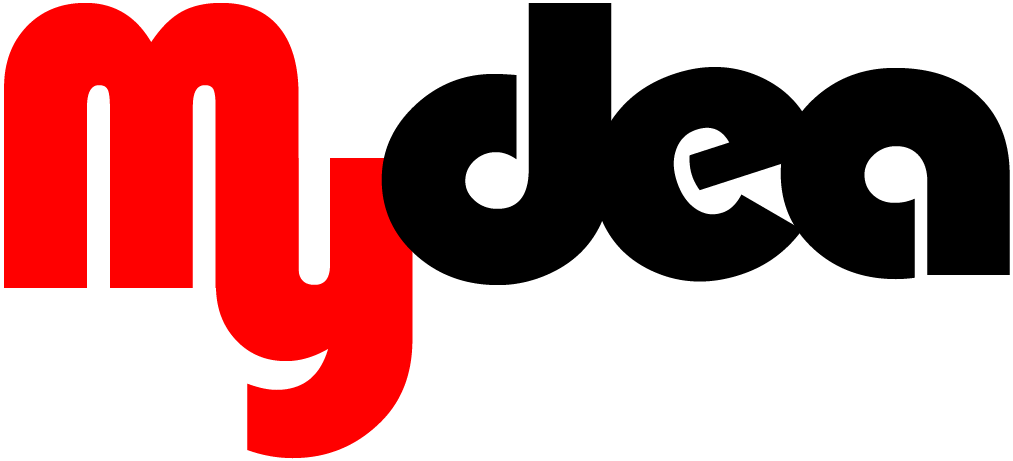
<style>
.page{position:relative;width:1013px;height:461px;background:#ffffff}
.page>*{position:absolute;margin:0}
.t1{font:416.7px "Bauhaus93";color:#ff0000}
.t2{font:416.7px "Bauhaus93";color:#000000;scale:1.08 1}
.t3{font:416.7px "Bauhaus93";color:#ff0000;scale:1.08 1}
</style>
<div class="page">
<p class="t1" style="left:4px;top:3px;width:295px;height:285px">M</p>
<p class="t2" style="left:381px;top:3px;width:231px;height:282px">d</p>
<p class="t2" style="left:592px;top:67px;width:227px;height:215px;rotate:-18deg">e</p>
<p class="t2" style="left:780px;top:68px;width:230px;height:212px">a</p>
<p class="t3" style="left:216px;top:158px;width:197px;height:301px">y</p>
</div>
